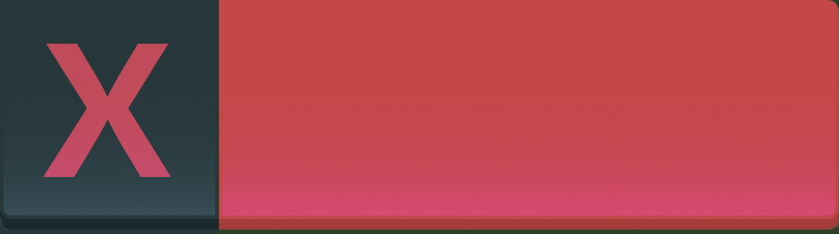
<style>
.page{position:relative;width:839px;height:234px}
.page>*{position:absolute;margin:0}
.t1{font:200px "EurostileBold";letter-spacing:-0.14em;color:#c14b5d}
</style>
<div class="page">
<p class="t1" style="left:43px;top:43px;width:128px;height:134px">X</p>
</div>
